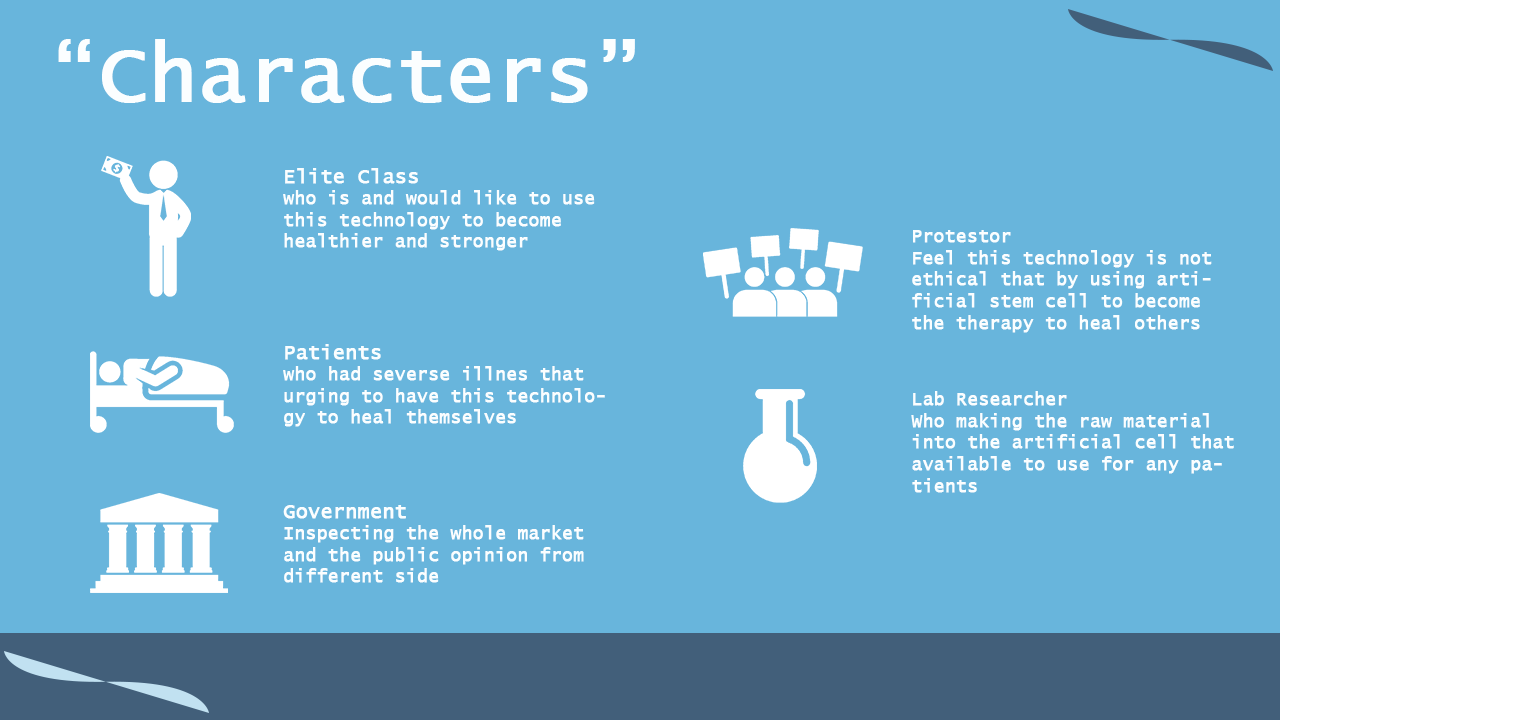
<style>
.page{position:relative;width:1536px;height:720px;background:#68b5dc}
.page>*{position:absolute;margin:0}
.t1{font:80px "LucidaConsole";letter-spacing:-0.01em;color:#fbfeff;font-weight:bold}
.t2{font:18px "LucidaConsole";letter-spacing:-0.01em;color:#fbfeff;font-weight:bold}
.t3{font:20px "LucidaConsole";letter-spacing:-0.01em;color:#fbfeff;font-weight:bold}
</style>
<div class="page">
<p class="t1" style="left:58px;top:39px;width:577px;height:64px">“Characters”</p>
<p class="t2" style="left:283px;top:168px;width:312px;height:83px"><span class="t3">Elite Class<br></span>who is and would like to use this technology to become healthier and stronger</p>
<p class="t2" style="left:912px;top:230px;width:300px;height:103px">Protestor<br>Feel this technology is not ethical that by using artificial stem cell to become the therapy to heal others</p>
<p class="t2" style="left:283px;top:344px;width:322px;height:83px"><span class="t3">Patients<br></span>who had severse illnes that urging to have this technology to heal themselves</p>
<p class="t2" style="left:911px;top:391px;width:323px;height:102px">Lab Researcher <br>Who making the raw material into the artificial cell that available to use for any patients</p>
<p class="t2" style="left:283px;top:505px;width:301px;height:78px"><span class="t3">Government <br></span>Inspecting the whole market and the public opinion from different side</p>
</div>
